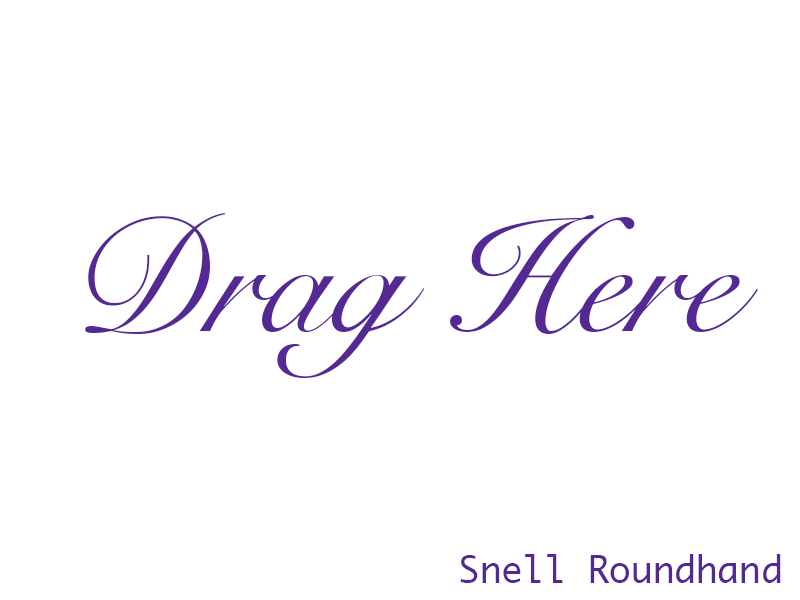
<style>
.page{position:relative;width:800px;height:600px;background:#ffffff}
.page>*{position:absolute;margin:0}
.t1{font:160px "SnellRoundhand";color:#542993}
.t2{font:36px "Monaco";color:#542993}
</style>
<div class="page">
<p class="t1" style="left:85px;top:213px;width:673px;height:165px">Drag Here</p>
<p class="t2" style="left:460px;top:554px;width:321px;height:29px">Snell Roundhand</p>
</div>
